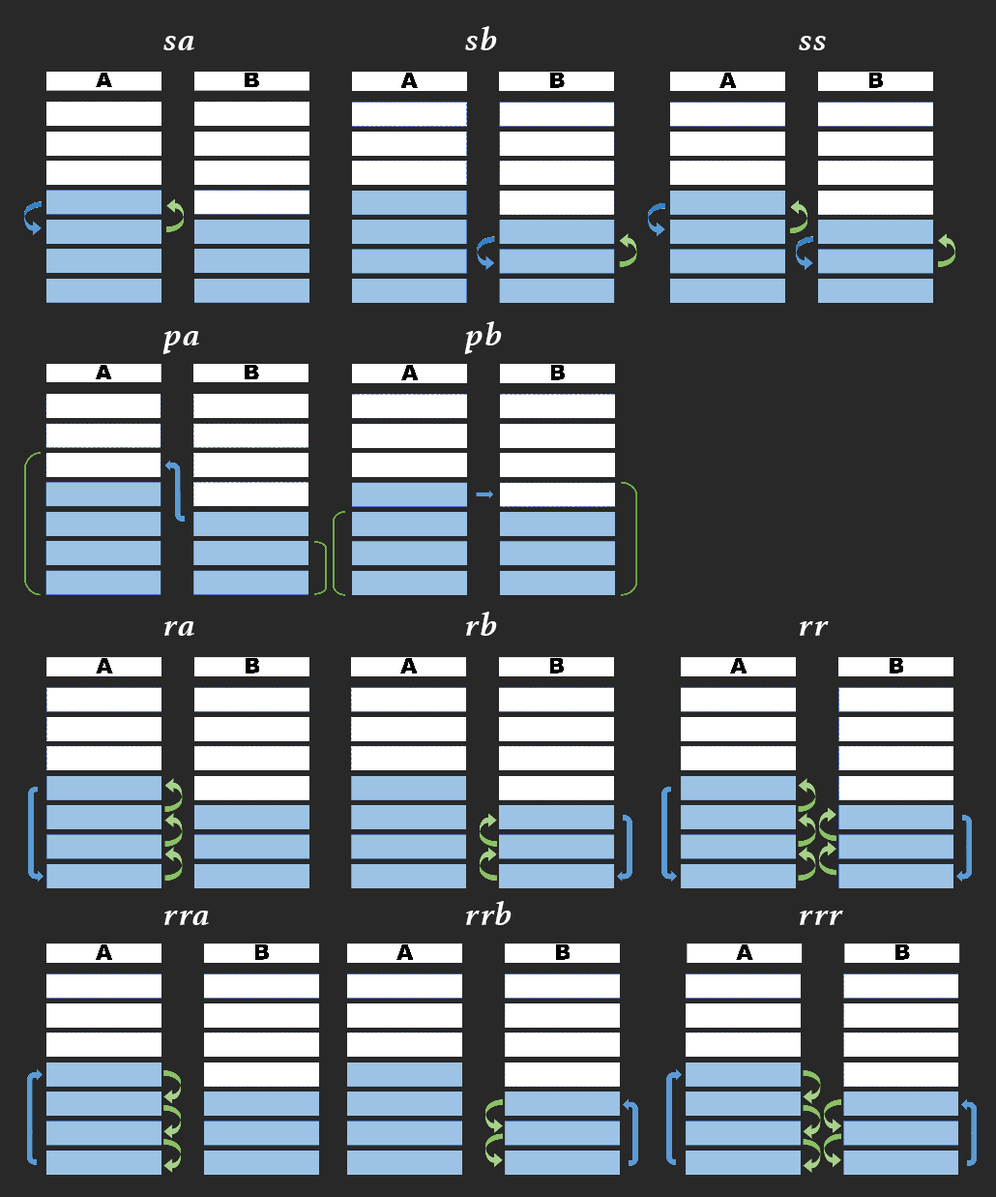
<style>
.page{position:relative;width:996px;height:1197px;background:#282828}
.page>*{position:absolute;margin:0}
.t1{font:34.8px "Athelas-BoldItalic";letter-spacing:0.045em;color:#ffffff}
</style>
<div class="page">
<p class="t1" style="left:465px;top:26px;width:32px;height:24px">sb</p>
<p class="t1" style="left:163px;top:36px;width:31px;height:14px">sa</p>
<p class="t1" style="left:799px;top:36px;width:27px;height:14px">ss</p>
<p class="t1" style="left:464px;top:321px;width:38px;height:33px">pb</p>
<p class="t1" style="left:163px;top:331px;width:36px;height:23px">pa</p>
<p class="t1" style="left:466px;top:611px;width:31px;height:25px">rb</p>
<p class="t1" style="left:164px;top:621px;width:30px;height:15px">ra</p>
<p class="t1" style="left:800px;top:621px;width:29px;height:15px">rr</p>
<p class="t1" style="left:466px;top:901px;width:46px;height:24px">rrb</p>
<p class="t1" style="left:164px;top:910px;width:45px;height:15px">rra</p>
<p class="t1" style="left:800px;top:910px;width:44px;height:15px">rrr</p>
</div>
